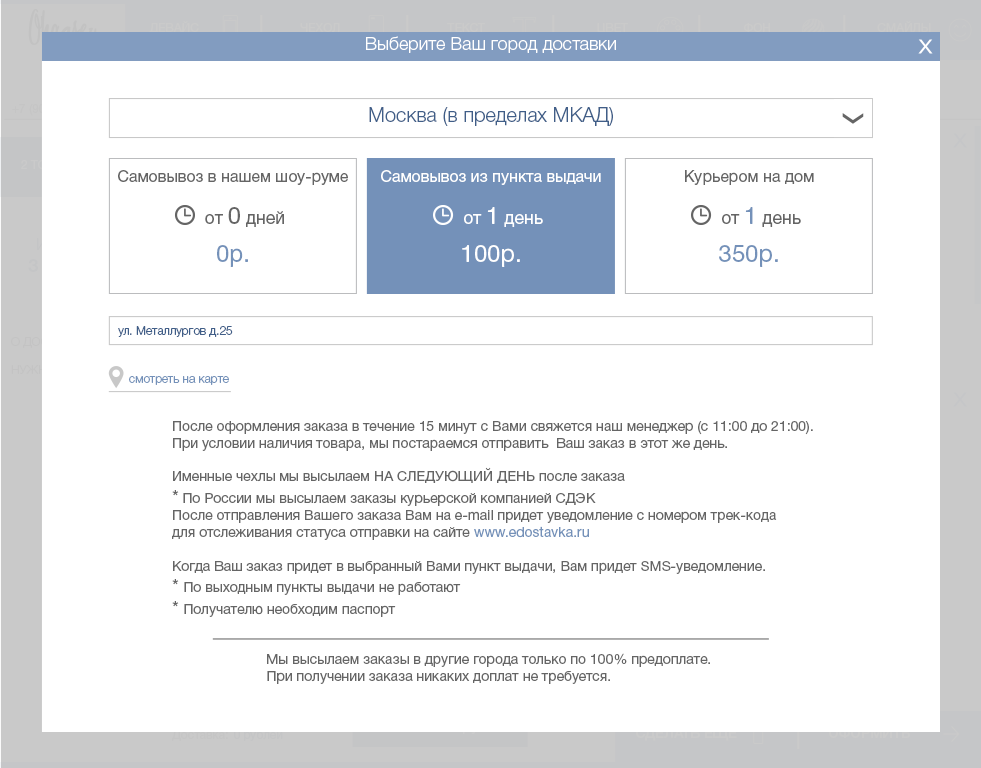
<style>
.page{position:relative;width:981px;height:768px;background:#ffffff}
.page>*{position:absolute;margin:0}
.t1{font:12px "HelveticaNeueCyr-Roman";color:#cacaca}
.t2{font:18px "HelveticaNeueCyr-Light";color:#ffffff}
.t3{font:20px "HelveticaNeueCyr-Light";color:#405e88}
.t4{font:16px "HelveticaNeueCyr-Roman";color:#656565}
.t5{font:16px "HelveticaNeueCyr-Roman";color:#ffffff}
.t6{font:17.7px "HelveticaNeueCyr-Roman";color:#656565}
.t7{font:23.6px "HelveticaNeueCyr-Roman";color:#656565}
.t8{font:17.7px "HelveticaNeueCyr-Roman";color:#ffffff}
.t9{font:23.6px "HelveticaNeueCyr-Roman";color:#ffffff}
.t10{font:23.6px "HelveticaNeueCyr-Roman";color:#7491b9}
.t11{font:24px "HelveticaNeueCyr-Roman";color:#7491b9}
.t12{font:24px "HelveticaNeueCyr-Roman";color:#ffffff}
.t13{font:12px "HelveticaNeueCyr-Light";color:#405e88}
.t14{font:12px "HelveticaNeueCyr-Light";color:#7491b9}
.t15{font:14px "HelveticaNeueCyr-Roman";color:#656565}
.t16{font:18px "HelveticaNeueCyr-Roman";color:#656565}
.t17{font:14px "HelveticaNeueCyr-Roman";color:#7491b9}
.t18{font:12px "HelveticaNeueCyr-Roman";color:#c5c5c5}
</style>
<div class="page">
<p class="t1" style="left:149px;top:21px;width:50px;height:13px">ДЕВАЙС</p>
<p class="t1" style="left:300px;top:23px;width:40px;height:10px">ЧЕХОЛ</p>
<p class="t1" style="left:447px;top:23px;width:38px;height:9px">ТЕКСТ</p>
<p class="t1" style="left:597px;top:23px;width:31px;height:11px">ЦВЕТ</p>
<p class="t1" style="left:744px;top:23px;width:26px;height:9px">ФОН</p>
<p class="t1" style="left:877px;top:21px;width:54px;height:12px">СМАЙЛЫ</p>
<p class="t2" style="left:366px;top:36px;width:250px;height:17px">Выберите Ваш город доставки</p>
<p class="t3" style="left:369px;top:107px;width:244px;height:19px">Москва (в пределах МКАД)</p>
<p class="t4" style="left:118px;top:170px;width:230px;height:15px">Самовывоз в нашем шоу-руме</p>
<p class="t5" style="left:381px;top:170px;width:220px;height:15px">Самовывоз из пункта выдачи</p>
<p class="t4" style="left:685px;top:170px;width:129px;height:15px">Курьером на дом</p>
<p class="t6" style="left:205px;top:207px;width:79px;height:20px">от <span class="t7">0</span> дней</p>
<p class="t8" style="left:464px;top:207px;width:79px;height:20px">от <span class="t9">1</span> день</p>
<p class="t6" style="left:722px;top:207px;width:79px;height:20px">от <span class="t10">1</span> день</p>
<p class="t11" style="left:217px;top:245px;width:31px;height:22px">0р.</p>
<p class="t12" style="left:462px;top:245px;width:58px;height:22px">100р.</p>
<p class="t11" style="left:719px;top:245px;width:59px;height:22px">350р.</p>
<p class="t13" style="left:118px;top:326px;width:115px;height:11px">ул. Металлургов д.25</p>
<p class="t14" style="left:129px;top:376px;width:100px;height:9px">смотреть на карте</p>
<p class="t15" style="left:173px;top:421px;width:640px;height:62px">После оформления заказа в течение 15 минут с Вами свяжется наш менеджер (с 11:00 до 21:00).<br>При условии наличия товара, мы постараемся отправить  Ваш заказ в этот же день.<br><br>Именные чехлы мы высылаем НА СЛЕДУЮЩИЙ ДЕНЬ после заказа</p>
<p class="t15" style="left:172px;top:490px;width:605px;height:127px"><span class="t16">*</span> По России мы высылаем заказы курьерской компанией СДЭК<br>После отправления Вашего заказа Вам на e-mail придет уведомление с номером трек-кода<br>для отслеживания статуса отправки на сайте <span class="t17">www.edostavka.ru<br></span><br>Когда Ваш заказ придет в выбранный Вами пункт выдачи, Вам придет SMS-уведомление.<br><span class="t16">* </span>По выходным пункты выдачи не работают <br><span class="t16">* </span>Получателю необходим паспорт</p>
<p class="t15" style="left:267px;top:653px;width:443px;height:31px">Мы высылаем заказы в другие города только по 100% предоплате. <br>При получении заказа никаких доплат не требуется.</p>
<p class="t18" style="left:172px;top:730px;width:56px;height:11px">Доставка:</p>
</div>
